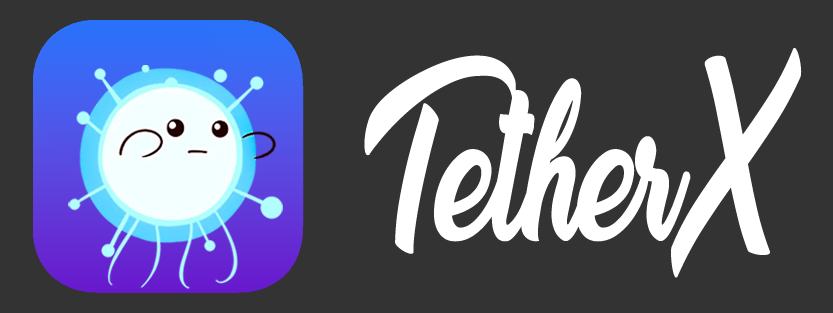
<style>
.page{position:relative;width:833px;height:313px;background:#333333}
.page>*{position:absolute;margin:0}
.t1{font:249.4px "SweetSensationsPersonalUse";color:#ffffff;scale:0.71 1}
</style>
<div class="page">
<p class="t1" style="left:364px;top:48px;width:438px;height:230px">TetherX</p>
</div>
